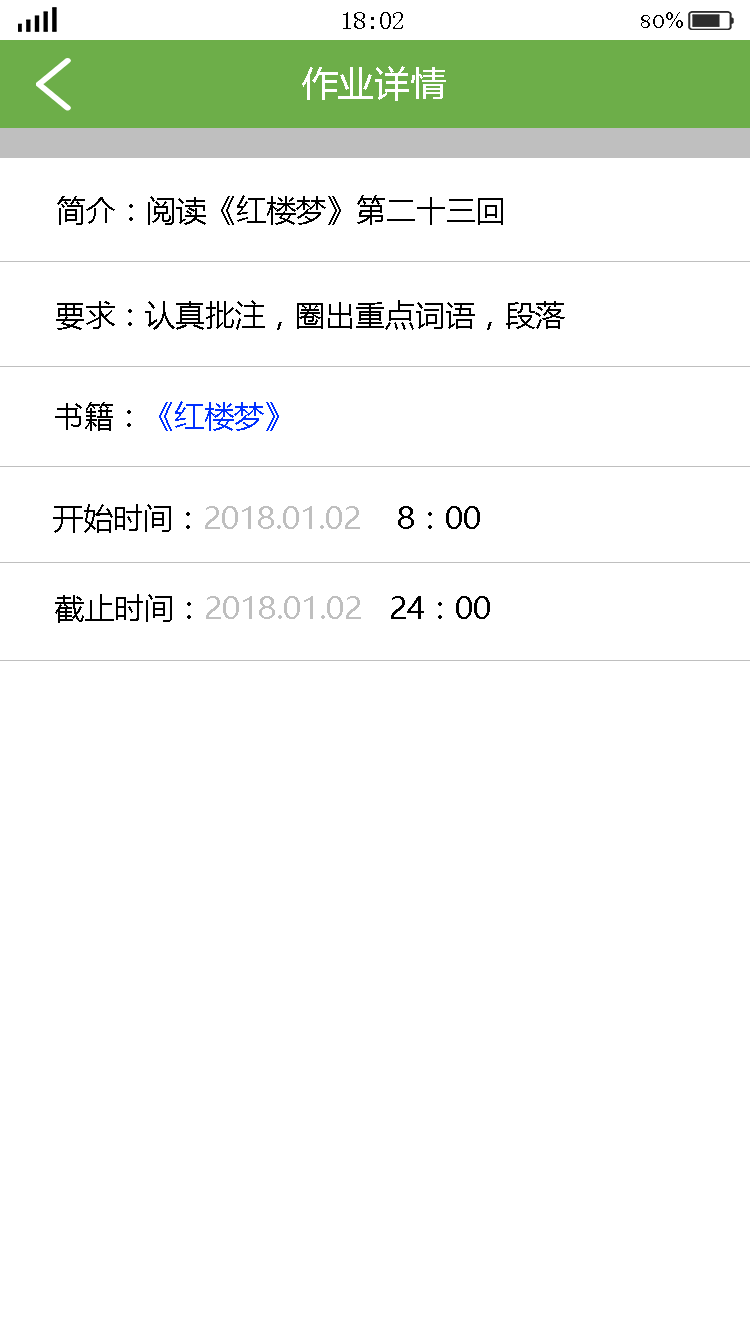
<style>
.page{position:relative;width:750px;height:1334px;background:#ffffff}
.page>*{position:absolute;margin:0}
.t1{font:25px "SimSun";color:#000000}
.t2{font:25px "BellMT";color:#000000}
.t3{font:36px "MicrosoftYaHei";color:#ffffff}
.t4{font:30px "MicrosoftYaHei";color:#000000}
.t5{font:30px "MicrosoftYaHei";color:#0030ff}
.t6{font:30px "MicrosoftYaHei";color:#bfbfbf}
</style>
<div class="page">
<p class="t1" style="left:343px;top:12px;width:60px;height:17px">18:02</p>
<p class="t2" style="left:641px;top:12px;width:42px;height:16px">80%</p>
<p class="t3" style="left:302px;top:66px;width:144px;height:35px">作业详情</p>
<p class="t4" style="left:57px;top:195px;width:446px;height:30px">简介：阅读《红楼梦》第二十三回</p>
<p class="t4" style="left:56px;top:300px;width:509px;height:30px">要求：认真批注，圈出重点词语，段落</p>
<p class="t5" style="left:55px;top:401px;width:224px;height:30px"><span class="t4">书籍：</span>《红楼梦》</p>
<p class="t6" style="left:53px;top:504px;width:427px;height:29px"><span class="t4">开始时间：</span>2018.01.02    <span class="t4">8：00</span></p>
<p class="t6" style="left:55px;top:594px;width:435px;height:29px"><span class="t4">截止时间：</span>2018.01.02<span class="t4">   24：00</span></p>
</div>
